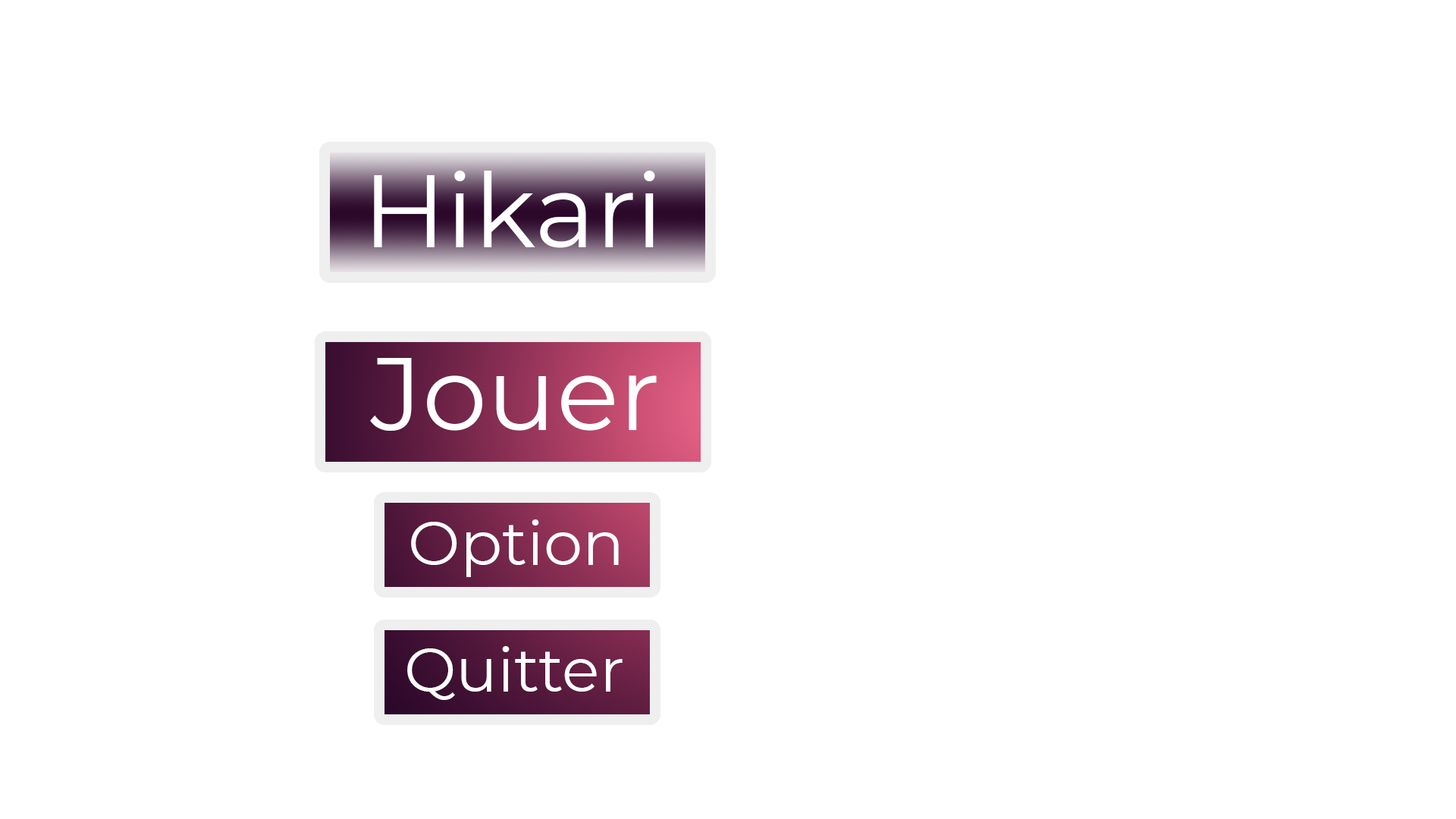
<style>
.page{position:relative;width:1456px;height:819px;background:#ffffff}
.page>*{position:absolute;margin:0}
.t1{font:102.9px "Montserrat-Regular";color:#ffffff}
.t2{font:61.7px "Montserrat-Regular";color:#ffffff}
</style>
<div class="page">
<p class="t1" style="left:374px;top:171px;width:281px;height:77px">Hikari</p>
<p class="t1" style="left:370px;top:358px;width:287px;height:73px">Jouer</p>
<p class="t2" style="left:411px;top:519px;width:208px;height:58px">Option</p>
<p class="t2" style="left:407px;top:646px;width:216px;height:54px">Quitter</p>
</div>
